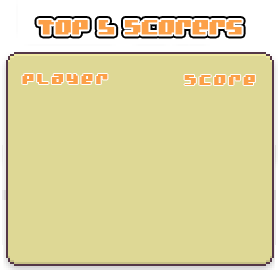
<style>
.page{position:relative;width:279px;height:280px;background:#ded895}
.page>*{position:absolute;margin:0}
.t1{font:15px "badrobot";letter-spacing:0.14em;color:#fca048;scale:1.07 1}
</style>
<div class="page">
<p class="t1" style="left:22px;top:74px;width:86px;height:10px">Player</p>
<p class="t1" style="left:184px;top:75px;width:71px;height:10px">Score</p>
</div>
